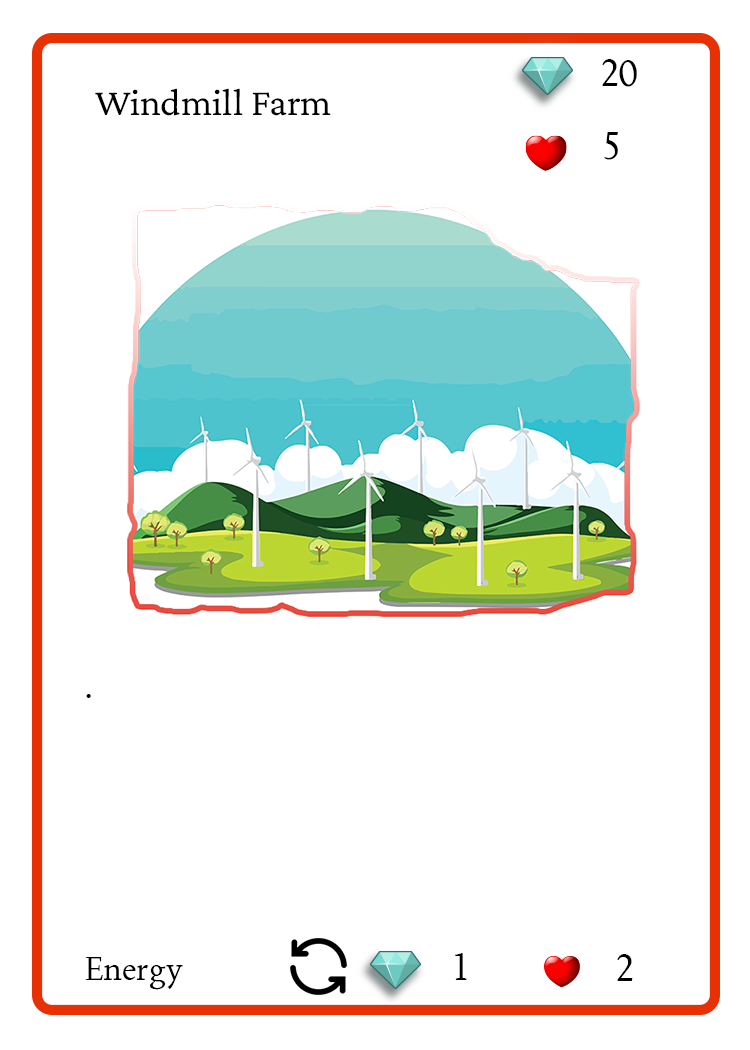
<style>
.page{position:relative;width:750px;height:1050px;background:#ffffff}
.page>*{position:absolute;margin:0}
.t1{font:37.5px "Joan-Regular";color:#000000;text-transform:uppercase}
.t2{font:38.9px "CrimsonPro-Regular";color:#000000}
.t3{font:33.3px "Joan-Regular";color:#000000}
</style>
<div class="page">
<p class="t1" style="left:602px;top:59px;width:35px;height:28px">20</p>
<p class="t2" style="left:95px;top:88px;width:236px;height:28px">Windmill Farm</p>
<p class="t1" style="left:604px;top:132px;width:14px;height:28px">5</p>
<p class="t3" style="left:86px;top:694px;width:5px;height:4px">.</p>
<p class="t1" style="left:455px;top:953px;width:12px;height:27px">1</p>
<p class="t3" style="left:85px;top:957px;width:98px;height:33px">Energy</p>
<p class="t1" style="left:617px;top:954px;width:16px;height:27px">2</p>
</div>
